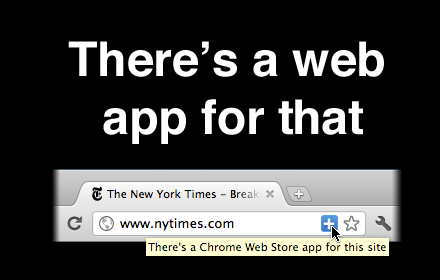
<style>
.page{position:relative;width:440px;height:280px;background:#000000}
.page>*{position:absolute;margin:0}
.t1{font:48px "Helvetica-Bold";color:#ffffff}
</style>
<div class="page">
<p class="t1" style="left:68px;top:41px;width:316px;height:103px;text-align:center">There’s a web <br>app for that</p>
</div>
